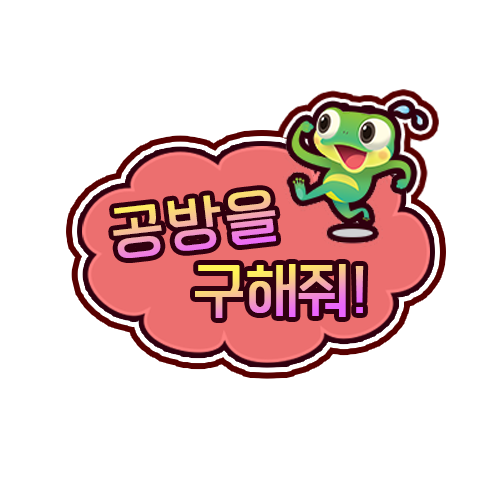
<style>
.page{position:relative;width:500px;height:500px;background:#ffffff}
.page>*{position:absolute;margin:0}
.t1{font:59.8px "EliceDigitalBaeum";letter-spacing:0.02em;font-weight:bold}
.t2{font:59.8px "EliceDigitalBaeum";letter-spacing:-0.06em;font-weight:bold}
</style>
<div class="page">
<p class="t1" style="left:113px;top:190px;width:163px;height:68px;rotate:-6deg">공방을</p>
<p class="t2" style="left:195px;top:264px;width:169px;height:54px">구해줘!</p>
</div>
